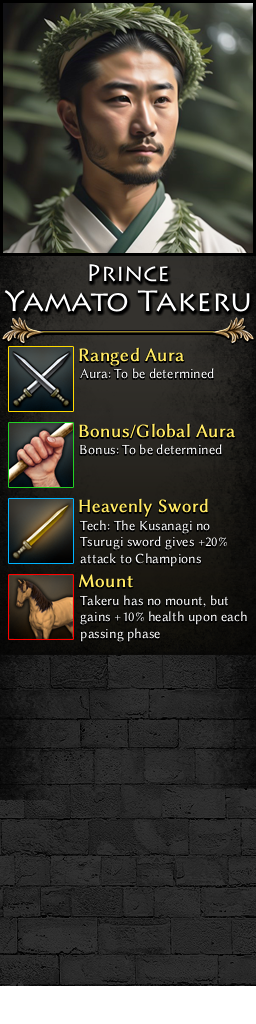
<style>
.page{position:relative;width:256px;height:1024px}
.page>*{position:absolute;margin:0}
.t1{font:29.5px/30px "Lithos";color:#ffffff}
.t2{font:24px/30px "Lithos";color:#ffffff}
.t3{font:19px "LinBiolinumO";color:#ffe963;font-weight:bold}
.t4{font:14px "LinBiolinumO";color:#ffffff}
.t5{font:19px "LinBiolinumO";color:#ffe963;font-weight:bold;scale:0.97 1}
</style>
<div class="page">
<p class="t1" style="left:4px;top:264px;width:246px;height:48px;text-align:center"><span class="t2">Prince<br></span>Yamato Takeru</p>
<p class="t3" style="left:79px;top:347px;width:106px;height:19px">Ranged Aura</p>
<p class="t4" style="left:80px;top:368px;width:134px;height:11px">Aura: To be determined</p>
<p class="t3" style="left:79px;top:423px;width:157px;height:16px">Bonus/Global Aura</p>
<p class="t4" style="left:80px;top:444px;width:142px;height:11px">Bonus: To be determined</p>
<p class="t5" style="left:79px;top:498px;width:129px;height:19px">Heavenly Sword</p>
<p class="t4" style="left:80px;top:520px;width:147px;height:47px">Tech: The Kusanagi no<br>Tsurugi sword gives +20%<br>attack to Champions</p>
<p class="t3" style="left:78px;top:574px;width:55px;height:14px">Mount</p>
<p class="t4" style="left:80px;top:595px;width:167px;height:47px">Takeru has no mount, but <br>gains +10% health upon each<br>passing phase</p>
</div>
